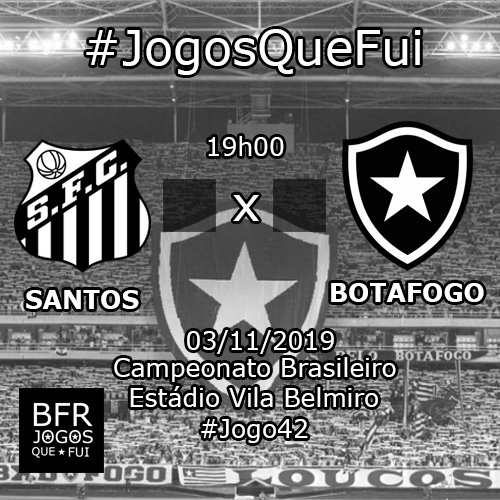
<style>
.page{position:relative;width:500px;height:500px}
.page>*{position:absolute;margin:0}
.t1{font:48px "Verdana";color:#ffffff}
.t2{font:25px "Verdana";color:#ffffff}
.t3{font:25px "Verdana-Bold";color:#ffffff}
</style>
<div class="page">
<p class="t1" style="left:86px;top:29px;width:335px;height:46px">#JogosQueFui</p>
<p class="t2" style="left:208px;top:136px;width:76px;height:20px">19h00</p>
<p class="t1" style="left:233px;top:195px;width:26px;height:26px">x</p>
<p class="t3" style="left:26px;top:290px;width:113px;height:19px">SANTOS</p>
<p class="t3" style="left:331px;top:283px;width:153px;height:19px">BOTAFOGO</p>
<p class="t2" style="left:187px;top:330px;width:147px;height:24px">03/11/2019</p>
<p class="t2" style="left:114px;top:357px;width:282px;height:25px">Campeonato Brasileiro</p>
<p class="t2" style="left:130px;top:386px;width:248px;height:21px">Estádio Vila Belmiro</p>
<p class="t2" style="left:201px;top:419px;width:107px;height:24px">#Jogo42</p>
</div>
